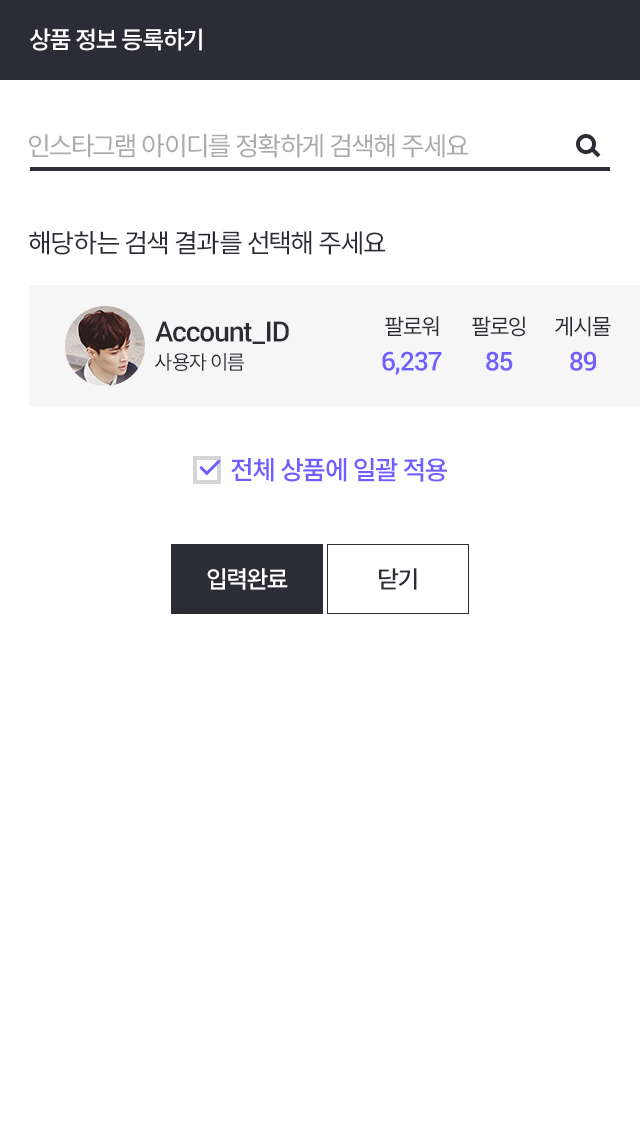
<style>
.page{position:relative;width:640px;height:1136px;background:#ffffff}
.page>*{position:absolute;margin:0}
.t1{font:24px "NotoSansCJKkr-Medium";letter-spacing:-0.04em;color:#ffffff}
.t2{font:26px "NotoSansCJKkr-Regular";letter-spacing:-0.04em;color:#ababad}
.t3{font:26px "NotoSansCJKkr-Regular";letter-spacing:-0.04em;color:#2b2c34}
.t4{font:22px "NotoSansCJKkr-Regular";letter-spacing:-0.04em;color:#2b2c34}
.t5{font:28px "Roboto-Medium";letter-spacing:-0.04em;color:#2b2c34}
.t6{font:20px "NotoSansCJKkr-Regular";letter-spacing:-0.04em;color:#2b2c34}
.t7{font:26px "Roboto-Medium";letter-spacing:-0.04em;color:#715eff}
.t8{font:26px "NotoSansCJKkr-Medium";letter-spacing:-0.04em;color:#715eff}
.t9{font:24px "NotoSansCJKkr-Medium";letter-spacing:-0.04em;color:#2b2c34}
</style>
<div class="page">
<p class="t1" style="left:30px;top:28px;width:172px;height:23px">상품 정보 등록하기</p>
<p class="t2" style="left:29px;top:134px;width:439px;height:24px">인스타그램 아이디를 정확하게 검색해 주세요</p>
<p class="t3" style="left:29px;top:231px;width:357px;height:24px">해당하는 검색 결과를 선택해 주세요</p>
<p class="t4" style="left:385px;top:316px;width:54px;height:20px">팔로워</p>
<p class="t4" style="left:472px;top:316px;width:53px;height:21px">팔로잉</p>
<p class="t4" style="left:555px;top:316px;width:56px;height:21px">게시물</p>
<p class="t5" style="left:155px;top:321px;width:134px;height:23px">Account_ID</p>
<p class="t6" style="left:155px;top:353px;width:89px;height:18px">사용자 이름</p>
<p class="t7" style="left:382px;top:351px;width:60px;height:24px">6,237</p>
<p class="t7" style="left:486px;top:351px;width:27px;height:20px">85</p>
<p class="t7" style="left:570px;top:351px;width:26px;height:20px">89</p>
<p class="t8" style="left:231px;top:457px;width:216px;height:25px">전체 상품에 일괄 적용</p>
<p class="t1" style="left:207px;top:568px;width:81px;height:22px">입력완료</p>
<p class="t9" style="left:379px;top:568px;width:38px;height:22px">닫기</p>
</div>
